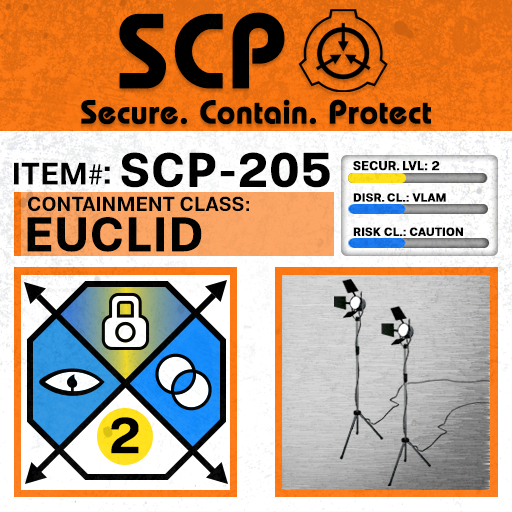
<style>
.page{position:relative;width:512px;height:512px}
.page>*{position:absolute;margin:0}
.t1{font:105.8px "BauhausLT-Demi";color:#000000;font-weight:bold}
.t2{font:33px "BauhausLT-Demi";color:#000000;font-weight:bold}
.t3{font:47.6px "Molde-Semibold";color:#000000;font-weight:bold}
.t4{font:12.5px "Molde-Semibold";color:#000000;font-weight:bold}
.t5{font:31.1px "Molde-Semibold";color:#000000}
.t6{font:31.1px "MyriadPro-Regular";color:#000000}
.t7{font:34.5px "Molde-Semibold";color:#000000}
.t8{font:20.3px "Molde-Semibold";color:#000000}
.t9{font:11.7px "Molde-Semibold";color:#000000;font-weight:bold}
.t10{font:47.8px "Molde-Semibold";color:#000000;font-weight:bold}
.t11{font:50px "Molde-Semibold";color:#000000;font-weight:bold}
</style>
<div class="page">
<p class="t1" style="left:119px;top:12px;width:166px;height:77px">SCP</p>
<p class="t2" style="left:81px;top:99px;width:350px;height:26px">Secure. Contain. Protect</p>
<p class="t3" style="left:121px;top:152px;width:209px;height:36px">SCP-205</p>
<p class="t4" style="left:353px;top:161px;width:87px;height:10px">SECUR. LVL: 2</p>
<p class="t5" style="left:14px;top:162px;width:89px;height:23px">ITEM<span class="t6">#</span></p>
<p class="t7" style="left:104px;top:166px;width:6px;height:18px">:</p>
<p class="t8" style="left:28px;top:196px;width:221px;height:16px">CONTAINMENT CLASS:</p>
<p class="t9" style="left:353px;top:193px;width:93px;height:9px">DISR. CL.: VLAM</p>
<p class="t10" style="left:27px;top:217px;width:175px;height:35px">EUCLID</p>
<p class="t9" style="left:353px;top:227px;width:110px;height:9px">RISK CL.: CAUTION</p>
<p class="t11" style="left:111px;top:417px;width:28px;height:37px">2</p>
</div>
